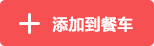
<style>
.page{position:relative;width:154px;height:46px;background:#f65053}
.page>*{position:absolute;margin:0}
.t1{font:16px "FZLTZHJW--GB1-0";color:#ffffff;font-weight:bold}
</style>
<div class="page">
<p class="t1" style="left:52px;top:16px;width:81px;height:16px">添加到餐车</p>
</div>
